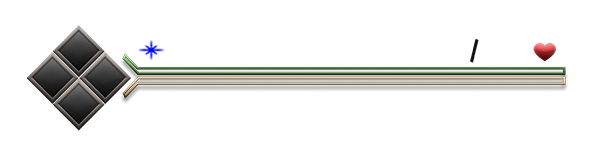
<style>
.page{position:relative;width:608px;height:152px;background:#ffffff}
.page>*{position:absolute;margin:0}
.t1{font:30px "BerlinSansFB-Reg";letter-spacing:0.14em;color:#080808;font-weight:bold}
</style>
<div class="page">
<p class="t1" style="left:470px;top:39px;width:9px;height:24px">/</p>
</div>
